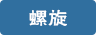
<style>
.page{position:relative;width:96px;height:35px;background:#306f9f}
.page>*{position:absolute;margin:0}
.t1{font:20px "FZHLJW--GB1-0";color:#ffffff}
</style>
<div class="page">
<p class="t1" style="left:29px;top:9px;width:38px;height:17px">螺旋</p>
</div>
